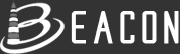
<style>
.page{position:relative;width:180px;height:54px;background:#333333}
.page>*{position:absolute;margin:0}
.t1{font:30.5px "Nike200204";letter-spacing:0.095em;color:#fefeff;text-transform:uppercase;font-weight:bold}
</style>
<div class="page">
<p class="t1" style="left:71px;top:11px;width:108px;height:33px">Eacon</p>
</div>
